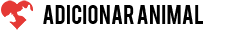
<style>
.page{position:relative;width:240px;height:32px;background:#ffffff}
.page>*{position:absolute;margin:0}
.t1{font:20.8px "Bebas";color:#000000}
</style>
<div class="page">
<p class="t1" style="left:43px;top:5px;width:160px;height:19px">Adicionar Animal</p>
</div>
